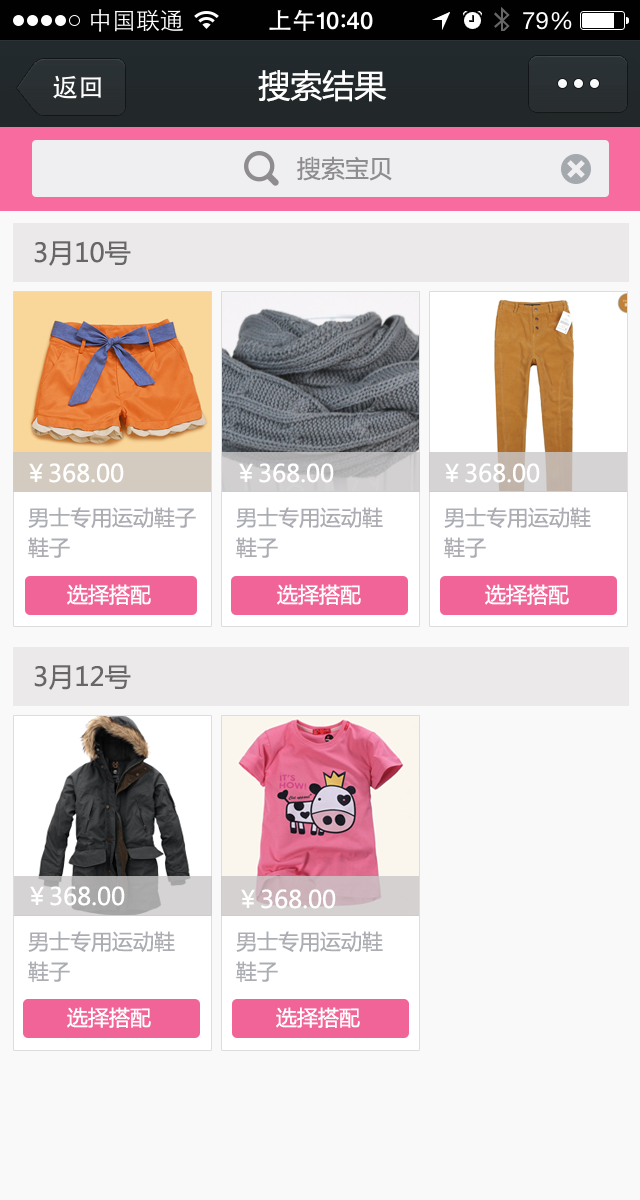
<style>
.page{position:relative;width:640px;height:1200px;background:#faf9f9}
.page>*{position:absolute;margin:0}
.t1{font:32px "MicrosoftYaHei";color:#ffffff}
.t2{font:24px "MicrosoftYaHei";color:#8e8c8f}
.t3{font:26px "MicrosoftYaHei";color:#676767}
.t4{font:24px "MicrosoftYaHei";color:#ffffff}
.t5{font:21px "MicrosoftYaHei";color:#abadb3}
.t6{font:21px "MicrosoftYaHei";color:#ffffff}
</style>
<div class="page">
<p class="t1" style="left:258px;top:70px;width:129px;height:32px">搜索结果</p>
<p class="t2" style="left:297px;top:156px;width:95px;height:25px">搜索宝贝</p>
<p class="t3" style="left:34px;top:241px;width:97px;height:25px">3月10号</p>
<p class="t4" style="left:29px;top:463px;width:95px;height:20px">￥368.00</p>
<p class="t4" style="left:239px;top:463px;width:95px;height:20px">￥368.00</p>
<p class="t4" style="left:445px;top:463px;width:95px;height:20px">￥368.00</p>
<p class="t5" style="left:28px;top:507px;width:168px;height:21px">男士专用运动鞋子</p>
<p class="t5" style="left:236px;top:507px;width:147px;height:21px">男士专用运动鞋</p>
<p class="t5" style="left:444px;top:507px;width:147px;height:21px">男士专用运动鞋</p>
<p class="t5" style="left:28px;top:537px;width:42px;height:21px">鞋子</p>
<p class="t5" style="left:236px;top:537px;width:42px;height:21px">鞋子</p>
<p class="t5" style="left:444px;top:537px;width:42px;height:21px">鞋子</p>
<p class="t6" style="left:67px;top:584px;width:84px;height:21px">选择搭配</p>
<p class="t6" style="left:277px;top:584px;width:84px;height:21px">选择搭配</p>
<p class="t6" style="left:485px;top:584px;width:84px;height:21px">选择搭配</p>
<p class="t3" style="left:34px;top:665px;width:97px;height:25px">3月12号</p>
<p class="t4" style="left:30px;top:886px;width:95px;height:20px">￥368.00</p>
<p class="t4" style="left:241px;top:889px;width:95px;height:20px">￥368.00</p>
<p class="t5" style="left:28px;top:931px;width:147px;height:21px">男士专用运动鞋</p>
<p class="t5" style="left:236px;top:931px;width:147px;height:21px">男士专用运动鞋</p>
<p class="t5" style="left:28px;top:961px;width:42px;height:21px">鞋子</p>
<p class="t5" style="left:236px;top:961px;width:42px;height:21px">鞋子</p>
<p class="t6" style="left:67px;top:1007px;width:84px;height:21px">选择搭配</p>
<p class="t6" style="left:276px;top:1007px;width:84px;height:21px">选择搭配</p>
</div>
